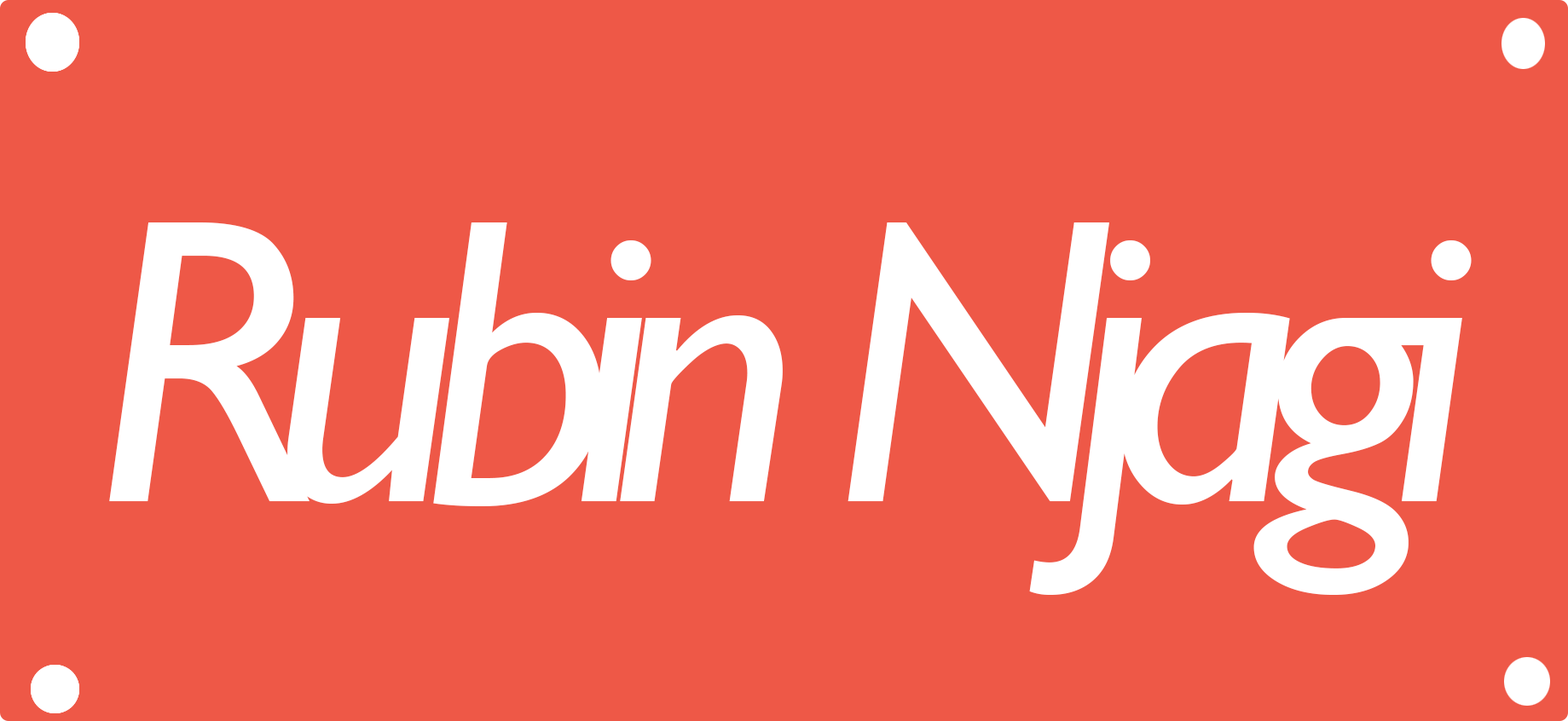
<style>
.page{position:relative;width:1568px;height:721px;background:#ee5847}
.page>*{position:absolute;margin:0}
.t1{font:408.6px "GillSansMT-Italic";letter-spacing:-0.1em;color:#ffffff}
</style>
<div class="page">
<p class="t1" style="left:109px;top:223px;width:1363px;height:372px">Rubin Njagi</p>
</div>
